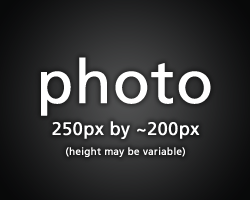
<style>
.page{position:relative;width:250px;height:200px}
.page>*{position:absolute;margin:0}
.t1{font:60px "FrutigerLT-Roman";color:#ffffff;font-weight:bold}
.t2{font:10px/20px "FrutigerLT-Roman";color:#ffffff;font-weight:bold}
.t3{font:18px "FrutigerLT-Roman";color:#ffffff;font-weight:bold}
</style>
<div class="page">
<p class="t1" style="left:41px;top:57px;width:170px;height:59px">photo</p>
<p class="t2" style="left:52px;top:121px;width:148px;height:36px;text-align:center"><span class="t3">250px by ~200px<br></span>(height may be variable)</p>
</div>
